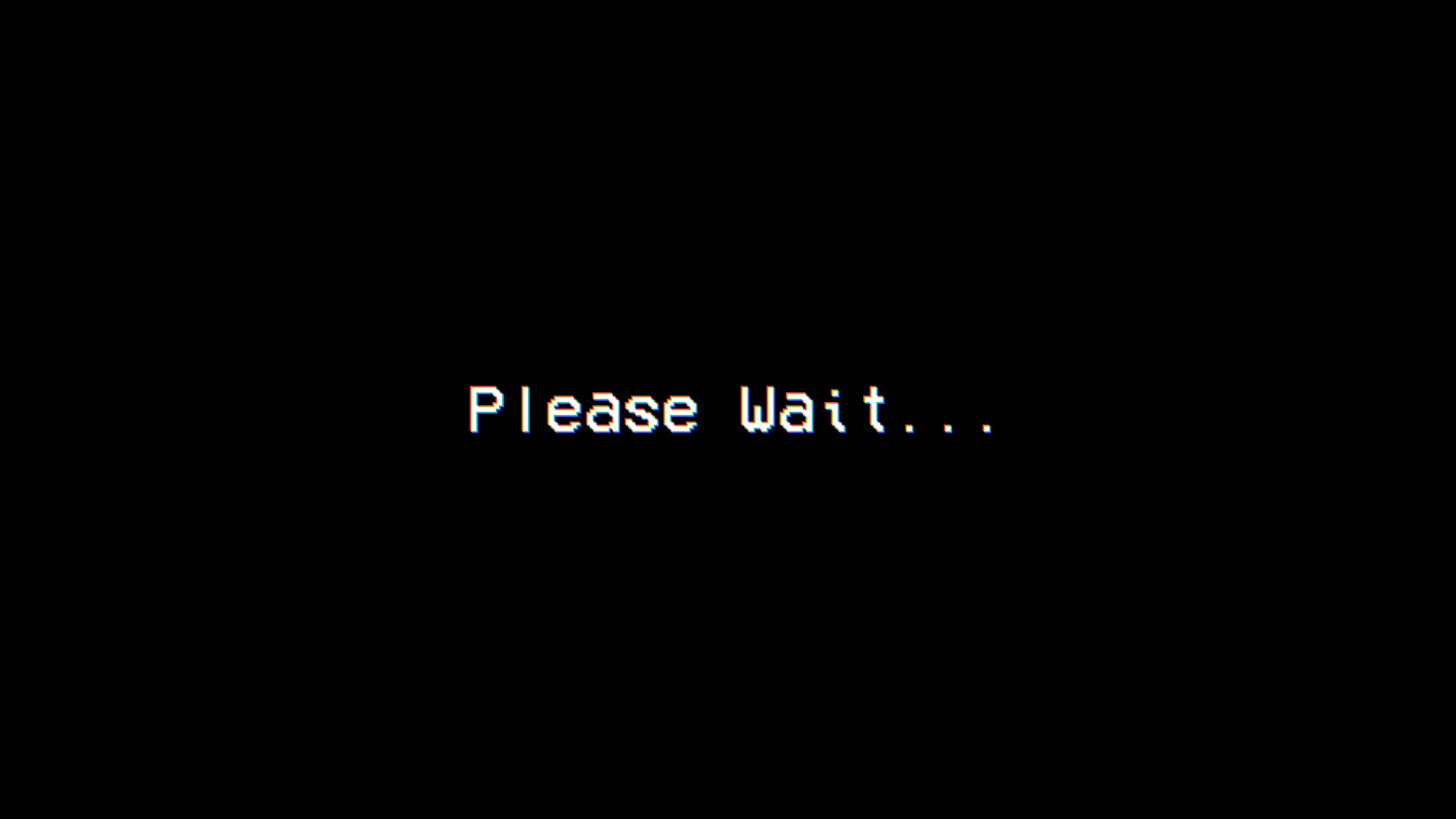
<style>
.page{position:relative;width:1456px;height:819px;background:#000000}
.page>*{position:absolute;margin:0}
.t1{font:66px "VCROSDMono";color:#ffffff}
</style>
<div class="page">
<p class="t1" style="left:469px;top:385px;width:521px;height:46px">Please Wait...</p>
<p class="t1" style="left:471px;top:387px;width:519px;height:45px">Please Wait...</p>
<p class="t1" style="left:472px;top:388px;width:519px;height:46px">Please Wait...</p>
</div>
